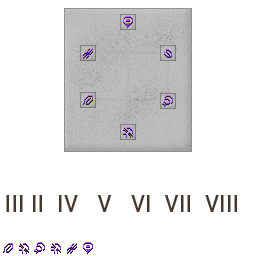
<style>
.page{position:relative;width:256px;height:256px;background:#ffffff}
.page>*{position:absolute;margin:0}
.t1{font:24px "Bahnschrift";color:#443730}
</style>
<div class="page">
<p class="t1" style="left:6px;top:195px;width:231px;height:17px">III II  IV   V   VI  VII  VIII</p>
</div>
